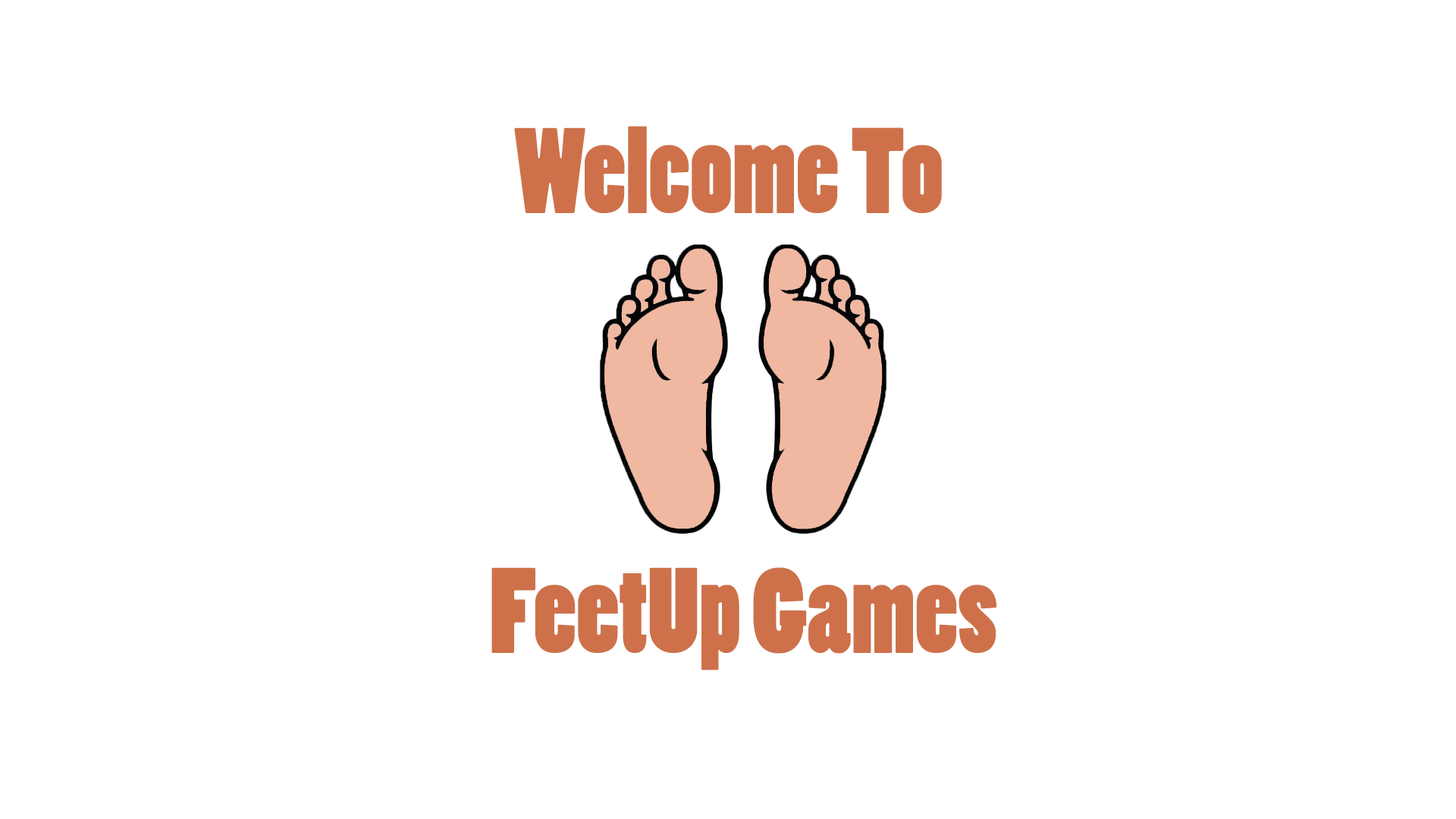
<style>
.page{position:relative;width:1456px;height:819px;background:#ffffff}
.page>*{position:absolute;margin:0}
.t1{font:113.4px "PoplarStd";color:#ce714a}
</style>
<div class="page">
<p class="t1" style="left:514px;top:126px;width:428px;height:87px">Welcome To</p>
<p class="t1" style="left:491px;top:567px;width:505px;height:103px">FeetUp Games</p>
</div>
